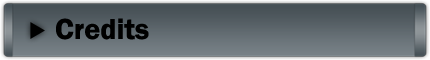
<style>
.page{position:relative;width:430px;height:60px}
.page>*{position:absolute;margin:0}
.t1{font:30px "FranklinGothic-Demi";color:#000000}
</style>
<div class="page">
<p class="t1" style="left:56px;top:18px;width:93px;height:22px">Credits</p>
</div>
